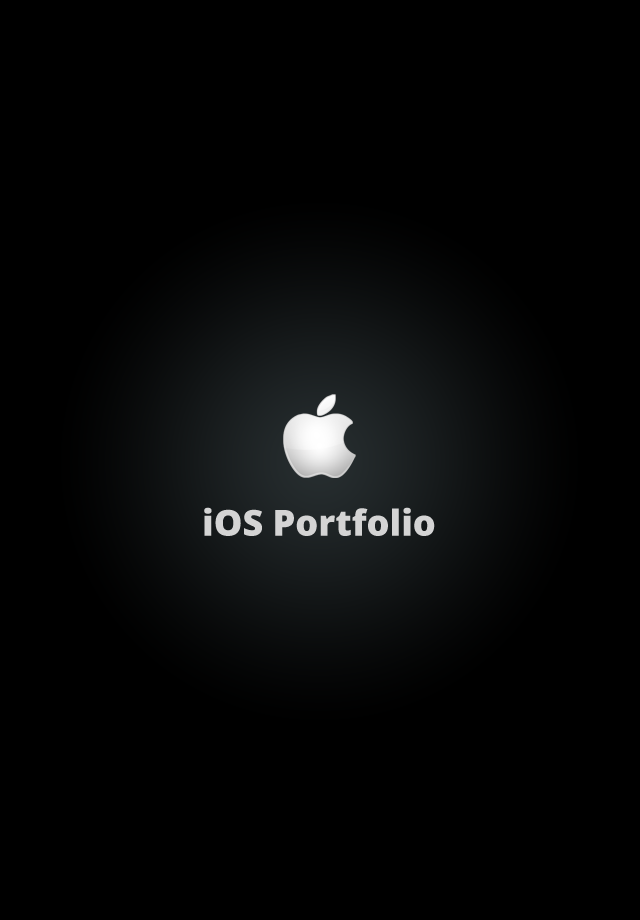
<style>
.page{position:relative;width:640px;height:920px;background:#000000}
.page>*{position:absolute;margin:0}
.t1{font:36px "OpenSans-Extrabold";color:#d4d4d4}
</style>
<div class="page">
<p class="t1" style="left:204px;top:507px;width:231px;height:29px">iOS Portfolio</p>
</div>
